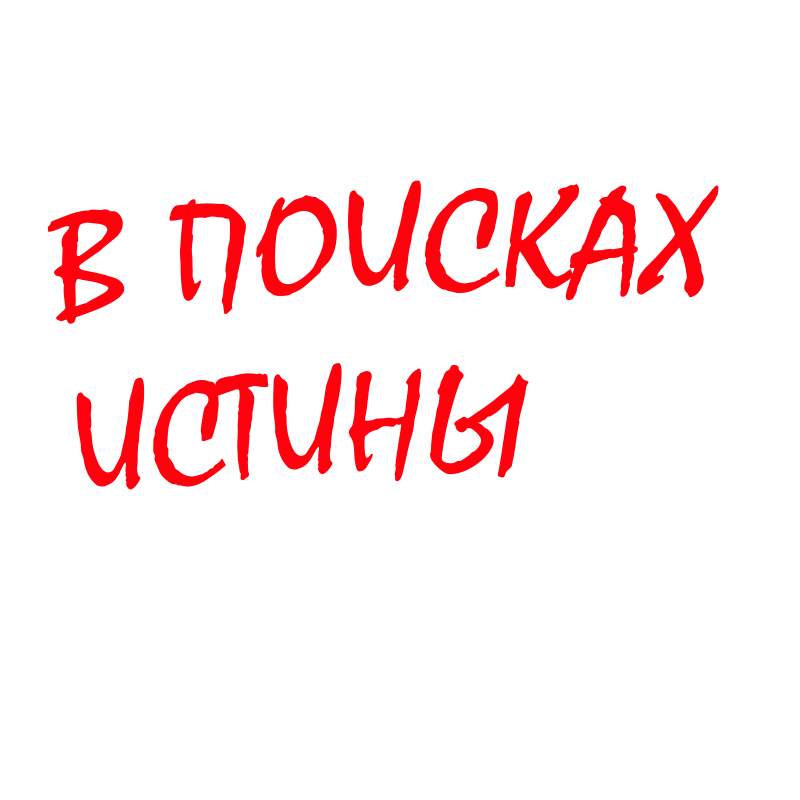
<style>
.page{position:relative;width:800px;height:800px;background:#ffffff}
.page>*{position:absolute;margin:0}
.t1{font:150px "Mistral";color:#ff000c}
</style>
<div class="page">
<p class="t1" style="left:47px;top:180px;width:672px;height:310px">В ПОИСКАХ ИСТИНЫ</p>
</div>
